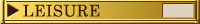
<style>
.page{position:relative;width:200px;height:24px}
.page>*{position:absolute;margin:0}
.t1{font:16px "CenturySchoolbook";letter-spacing:0.025em;color:#321a02}
</style>
<div class="page">
<p class="t1" style="left:23px;top:4px;width:77px;height:13px">LEISURE</p>
</div>
